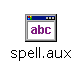
<style>
.page{position:relative;width:80px;height:80px;background:#ffffff}
.page>*{position:absolute;margin:0}
.t1{font:14px "MSReferenceSansSerif";color:#000000}
</style>
<div class="page">
<p class="t1" style="left:11px;top:47px;width:60px;height:14px">spell.aux</p>
</div>
